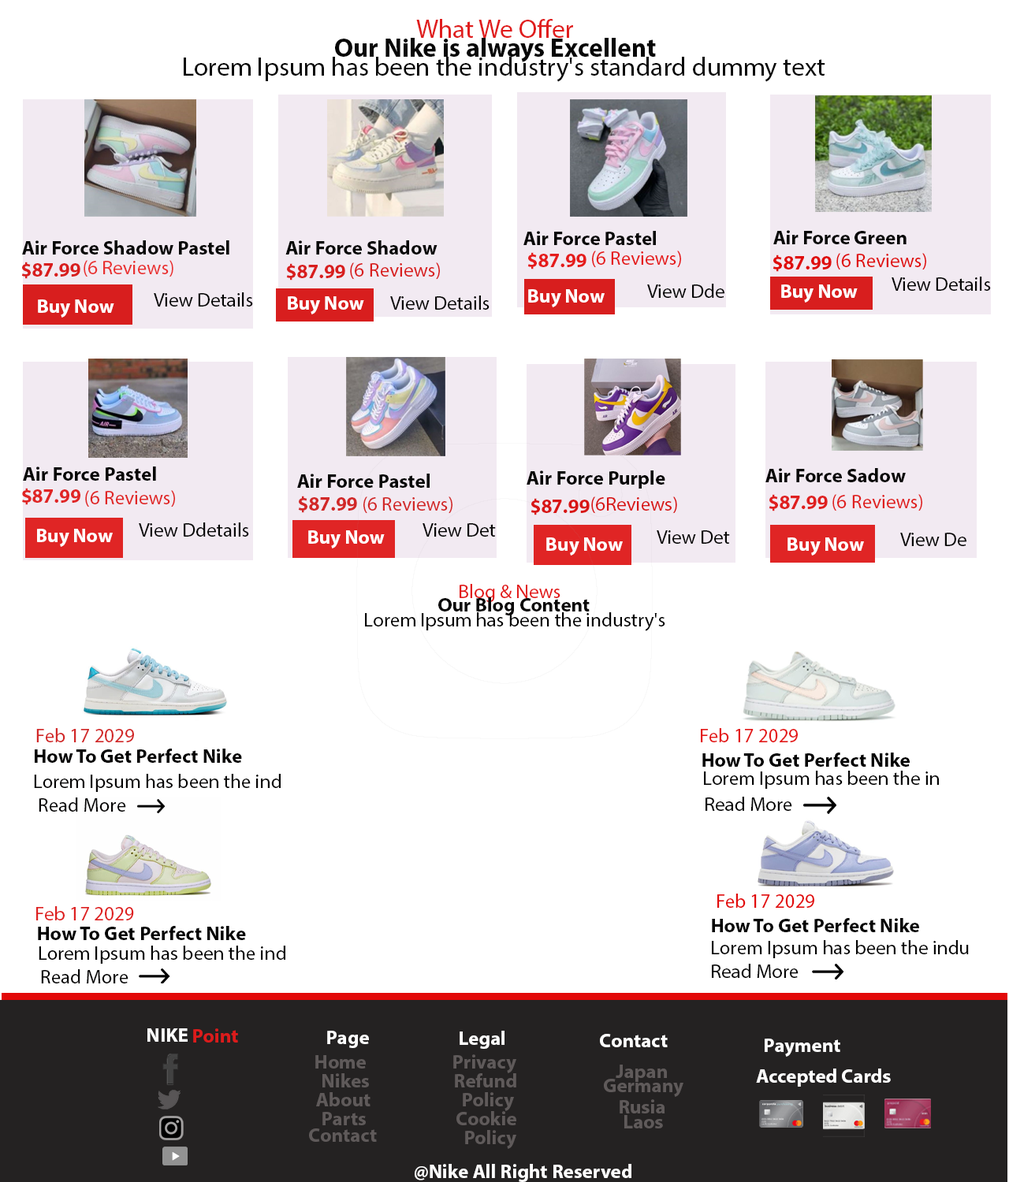
<style>
.page{position:relative;width:1009px;height:1182px;background:#ffffff}
.page>*{position:absolute;margin:0}
.t1{font:26.3px "MyriadPro-Regular";color:#e01d1d}
.t2{font:26.3px "MyriadPro-Bold";color:#070707}
.t3{font:26.3px "MyriadPro-Regular";color:#070707}
.t4{font:19.7px "MyriadPro-Bold";color:#070606}
.t5{font:19.7px "MyriadPro-Bold";color:#060606}
.t6{font:19.7px "MyriadPro-Bold";color:#070707}
.t7{font:19.7px "MyriadPro-Bold";color:#e51c1c}
.t8{font:19.7px "MyriadPro-Regular";color:#e51c1c}
.t9{font:19.7px "MyriadPro-Bold";color:#df0d0d}
.t10{font:19.7px "MyriadPro-Regular";color:#df0d0d}
.t11{font:19.7px "MyriadPro-Bold";color:#d81e1e}
.t12{font:19.7px "MyriadPro-Regular";color:#e93030}
.t13{font:19.7px "MyriadPro-Regular";color:#d81e1e}
.t14{font:19.7px "MyriadPro-Regular";color:#060505}
.t15{font:19.7px "MyriadPro-Regular";color:#040404}
.t16{font:19.7px "MyriadPro-Bold";color:#ffffff}
.t17{font:19.7px "MyriadPro-Regular";color:#060606}
.t18{font:19.7px "MyriadPro-Regular";color:#070606}
.t19{font:19.7px "MyriadPro-Bold";color:#060505}
.t20{font:19.7px "MyriadPro-Bold";color:#e02525}
.t21{font:19.7px "MyriadPro-Regular";color:#e02525}
.t22{font:19.7px "MyriadPro-Bold";color:#d22828}
.t23{font:19.7px "MyriadPro-Regular";color:#d22828}
.t24{font:19.7px "MyriadPro-Regular";color:#d81515}
.t25{font:19.7px "MyriadPro-Bold";color:#df1f1f}
.t26{font:19.7px "MyriadPro-Regular";color:#df1f1f}
.t27{font:19.7px "MyriadPro-Bold";color:#d81515}
.t28{font:19.7px "MyriadPro-Regular";color:#070707}
.t29{font:19.7px "MyriadPro-Regular";color:#e21919}
.t30{font:19.7px "MyriadPro-Bold";color:#0a0808}
.t31{font:19.7px "MyriadPro-Regular";color:#010101}
.t32{font:19.7px "MyriadPro-Regular";color:#e41818}
.t33{font:19.7px "MyriadPro-Bold";color:#050404}
.t34{font:19.7px "MyriadPro-Bold";color:#020202}
.t35{font:19.7px "MyriadPro-Regular";color:#050404}
.t36{font:19.7px "MyriadPro-Regular";color:#020202}
.t37{font:19.7px "MyriadPro-Regular";color:#e20909}
.t38{font:19.7px "MyriadPro-Regular";color:#de2020}
.t39{font:19.7px "MyriadPro-Bold";color:#050505}
.t40{font:19.7px "MyriadPro-Regular";color:#050505}
.t41{font:19.7px "MyriadPro-Bold";color:#dc1b1b}
.t42{font:19.7px "MyriadPro-Bold";color:#5f5a5a}
</style>
<div class="page">
<p class="t1" style="left:416px;top:19px;width:157px;height:19px">What We Offer</p>
<p class="t2" style="left:335px;top:38px;width:321px;height:24px">Our Nike is always Excellent</p>
<p class="t3" style="left:184px;top:57px;width:641px;height:25px">Lorem Ipsum has been the industry's standard dummy text</p>
<p class="t4" style="left:523px;top:231px;width:133px;height:14px">Air Force Pastel</p>
<p class="t5" style="left:773px;top:230px;width:133px;height:14px">Air Force Green</p>
<p class="t6" style="left:22px;top:240px;width:207px;height:15px">Air Force Shadow Pastel</p>
<p class="t6" style="left:285px;top:240px;width:152px;height:15px">Air Force Shadow</p>
<p class="t7" style="left:527px;top:252px;width:59px;height:18px">$87.99</p>
<p class="t8" style="left:592px;top:251px;width:89px;height:17px">(6 Reviews)</p>
<p class="t9" style="left:772px;top:255px;width:59px;height:17px">$87.99</p>
<p class="t10" style="left:836px;top:253px;width:90px;height:17px">(6 Reviews)</p>
<p class="t11" style="left:21px;top:262px;width:59px;height:17px">$87.99</p>
<p class="t12" style="left:84px;top:260px;width:89px;height:17px">(6 Reviews)</p>
<p class="t11" style="left:286px;top:263px;width:59px;height:18px">$87.99</p>
<p class="t13" style="left:350px;top:262px;width:90px;height:18px">(6 Reviews)</p>
<p class="t14" style="left:891px;top:277px;width:100px;height:14px">View Details</p>
<p class="t15" style="left:154px;top:292px;width:99px;height:15px">View Details</p>
<p class="t16" style="left:528px;top:289px;width:76px;height:18px">Buy Now</p>
<p class="t17" style="left:647px;top:284px;width:77px;height:14px">View Dde</p>
<p class="t16" style="left:781px;top:284px;width:76px;height:19px">Buy Now</p>
<p class="t16" style="left:38px;top:299px;width:76px;height:19px">Buy Now</p>
<p class="t16" style="left:288px;top:296px;width:76px;height:18px">Buy Now</p>
<p class="t18" style="left:390px;top:296px;width:99px;height:14px">View Details</p>
<p class="t19" style="left:23px;top:467px;width:133px;height:14px">Air Force Pastel</p>
<p class="t6" style="left:297px;top:474px;width:132px;height:14px">Air Force Pastel</p>
<p class="t19" style="left:526px;top:470px;width:139px;height:19px">Air Force Purple</p>
<p class="t4" style="left:765px;top:468px;width:140px;height:14px">Air Force Sadow</p>
<p class="t20" style="left:22px;top:488px;width:58px;height:17px">$87.99</p>
<p class="t21" style="left:85px;top:490px;width:90px;height:18px">(6 Reviews)</p>
<p class="t22" style="left:298px;top:496px;width:59px;height:17px">$87.99</p>
<p class="t23" style="left:363px;top:496px;width:89px;height:18px">(6 Reviews)</p>
<p class="t24" style="left:591px;top:496px;width:86px;height:18px">(6Reviews)</p>
<p class="t25" style="left:768px;top:494px;width:59px;height:17px">$87.99</p>
<p class="t26" style="left:832px;top:494px;width:90px;height:17px">(6 Reviews)</p>
<p class="t27" style="left:530px;top:498px;width:59px;height:17px">$87.99</p>
<p class="t16" style="left:37px;top:529px;width:76px;height:18px">Buy Now</p>
<p class="t28" style="left:139px;top:522px;width:110px;height:15px">View Ddetails</p>
<p class="t16" style="left:308px;top:530px;width:77px;height:18px">Buy Now</p>
<p class="t14" style="left:422px;top:523px;width:74px;height:14px">View Det</p>
<p class="t18" style="left:656px;top:530px;width:74px;height:14px">View Det</p>
<p class="t14" style="left:900px;top:533px;width:66px;height:13px">View De</p>
<p class="t16" style="left:546px;top:537px;width:77px;height:19px">Buy Now</p>
<p class="t16" style="left:787px;top:537px;width:77px;height:19px">Buy Now</p>
<p class="t29" style="left:459px;top:584px;width:101px;height:18px">Blog &amp; News</p>
<p class="t30" style="left:438px;top:597px;width:151px;height:18px">Our Blog Content</p>
<p class="t31" style="left:365px;top:612px;width:300px;height:19px">Lorem Ipsum has been the industry's</p>
<p class="t23" style="left:36px;top:728px;width:98px;height:14px">Feb 17 2029</p>
<p class="t32" style="left:701px;top:728px;width:97px;height:14px">Feb 17 2029</p>
<p class="t33" style="left:35px;top:749px;width:207px;height:14px">How To Get Perfect Nike</p>
<p class="t34" style="left:702px;top:753px;width:207px;height:14px">How To Get Perfect Nike</p>
<p class="t35" style="left:34px;top:774px;width:247px;height:18px">Lorem Ipsum has been the ind</p>
<p class="t36" style="left:704px;top:771px;width:235px;height:18px">Lorem Ipsum has been the in</p>
<p class="t35" style="left:39px;top:798px;width:87px;height:14px">Read More</p>
<p class="t36" style="left:705px;top:797px;width:87px;height:14px">Read More</p>
<p class="t37" style="left:717px;top:894px;width:97px;height:14px">Feb 17 2029</p>
<p class="t38" style="left:36px;top:906px;width:98px;height:14px">Feb 17 2029</p>
<p class="t34" style="left:38px;top:926px;width:208px;height:14px">How To Get Perfect Nike</p>
<p class="t39" style="left:712px;top:918px;width:207px;height:14px">How To Get Perfect Nike</p>
<p class="t40" style="left:712px;top:940px;width:257px;height:18px">Lorem Ipsum has been the indu</p>
<p class="t36" style="left:39px;top:946px;width:246px;height:18px">Lorem Ipsum has been the ind</p>
<p class="t40" style="left:712px;top:964px;width:86px;height:14px">Read More</p>
<p class="t35" style="left:41px;top:969px;width:87px;height:15px">Read More</p>
<p class="t16" style="left:147px;top:1028px;width:41px;height:14px">NIKE</p>
<p class="t41" style="left:193px;top:1028px;width:45px;height:15px">Point</p>
<p class="t16" style="left:327px;top:1031px;width:42px;height:17px">Page</p>
<p class="t16" style="left:459px;top:1031px;width:45px;height:18px">Legal</p>
<p class="t16" style="left:600px;top:1034px;width:67px;height:13px">Contact</p>
<p class="t16" style="left:764px;top:1039px;width:76px;height:18px">Payment</p>
<p class="t42" style="left:315px;top:1055px;width:51px;height:14px">Home</p>
<p class="t42" style="left:453px;top:1054px;width:63px;height:19px">Privacy</p>
<p class="t42" style="left:322px;top:1073px;width:47px;height:15px">Nikes</p>
<p class="t42" style="left:455px;top:1073px;width:61px;height:15px">Refund</p>
<p class="t42" style="left:615px;top:1065px;width:52px;height:17px">Japan</p>
<p class="t16" style="left:756px;top:1069px;width:135px;height:18px">Accepted Cards</p>
<p class="t42" style="left:604px;top:1079px;width:79px;height:18px">Germany</p>
<p class="t42" style="left:316px;top:1092px;width:54px;height:14px">About</p>
<p class="t42" style="left:463px;top:1092px;width:51px;height:19px">Policy</p>
<p class="t42" style="left:619px;top:1099px;width:46px;height:15px">Rusia</p>
<p class="t42" style="left:322px;top:1112px;width:44px;height:13px">Parts</p>
<p class="t42" style="left:456px;top:1111px;width:60px;height:14px">Cookie</p>
<p class="t42" style="left:624px;top:1115px;width:39px;height:14px">Laos</p>
<p class="t42" style="left:309px;top:1129px;width:68px;height:13px">Contact</p>
<p class="t42" style="left:465px;top:1130px;width:51px;height:19px">Policy</p>
<p class="t16" style="left:415px;top:1164px;width:216px;height:18px">@Nike All Right Reserved</p>
</div>
